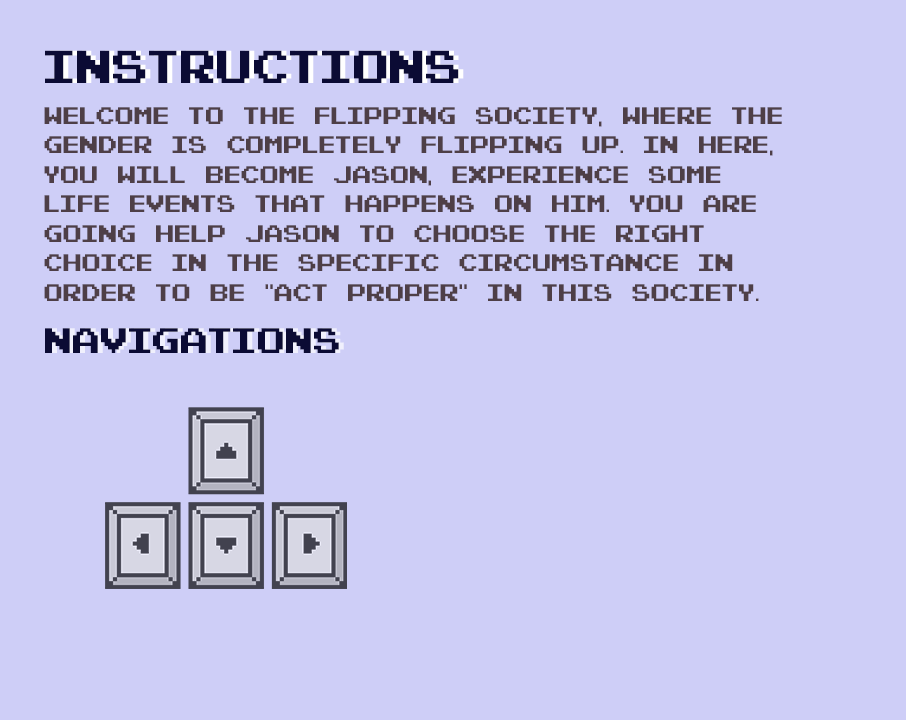
<style>
.page{position:relative;width:906px;height:720px;background:#cecef7}
.page>*{position:absolute;margin:0}
.t1{font:47.1px "PixelEmulator";letter-spacing:-0.01em;color:#0b0b34}
.t2{font:24.6px "PixelEmulator";letter-spacing:-0.01em;color:#4e3f47}
.t3{font:36.2px "PixelEmulator";letter-spacing:-0.01em;color:#0b0b34}
</style>
<div class="page">
<p class="t1" style="left:45px;top:50px;width:414px;height:33px">Instructions</p>
<p class="t2" style="left:44px;top:107px;width:738px;height:194px">Welcome to the flipping society, where the gender is completely flipping up. In here, you will become Jason, experience some life events that happens on him. You are going help Jason to choose the right choice in the specific circumstance in order to be “act proper” in this society.</p>
<p class="t3" style="left:45px;top:328px;width:294px;height:25px">Navigations</p>
</div>
